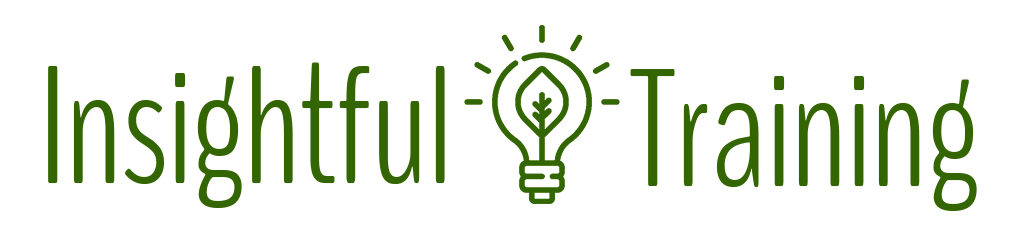
<style>
.page{position:relative;width:1024px;height:249px;background:#ffffff}
.page>*{position:absolute;margin:0}
.t1{font:166.7px "BenchNine-Light";color:#336600}
</style>
<div class="page">
<p class="t1" style="left:48px;top:62px;width:397px;height:146px">Insightful</p>
<p class="t1" style="left:630px;top:69px;width:347px;height:142px">Training</p>
</div>
